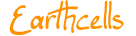
<style>
.page{position:relative;width:136px;height:36px;background:#ffffff}
.page>*{position:absolute;margin:0}
.t1{font:31.6px "Ellianarelle'sPath";color:#ff9100}
</style>
<div class="page">
<p class="t1" style="left:9px;top:0px;width:115px;height:35px">Earthcells</p>
</div>
